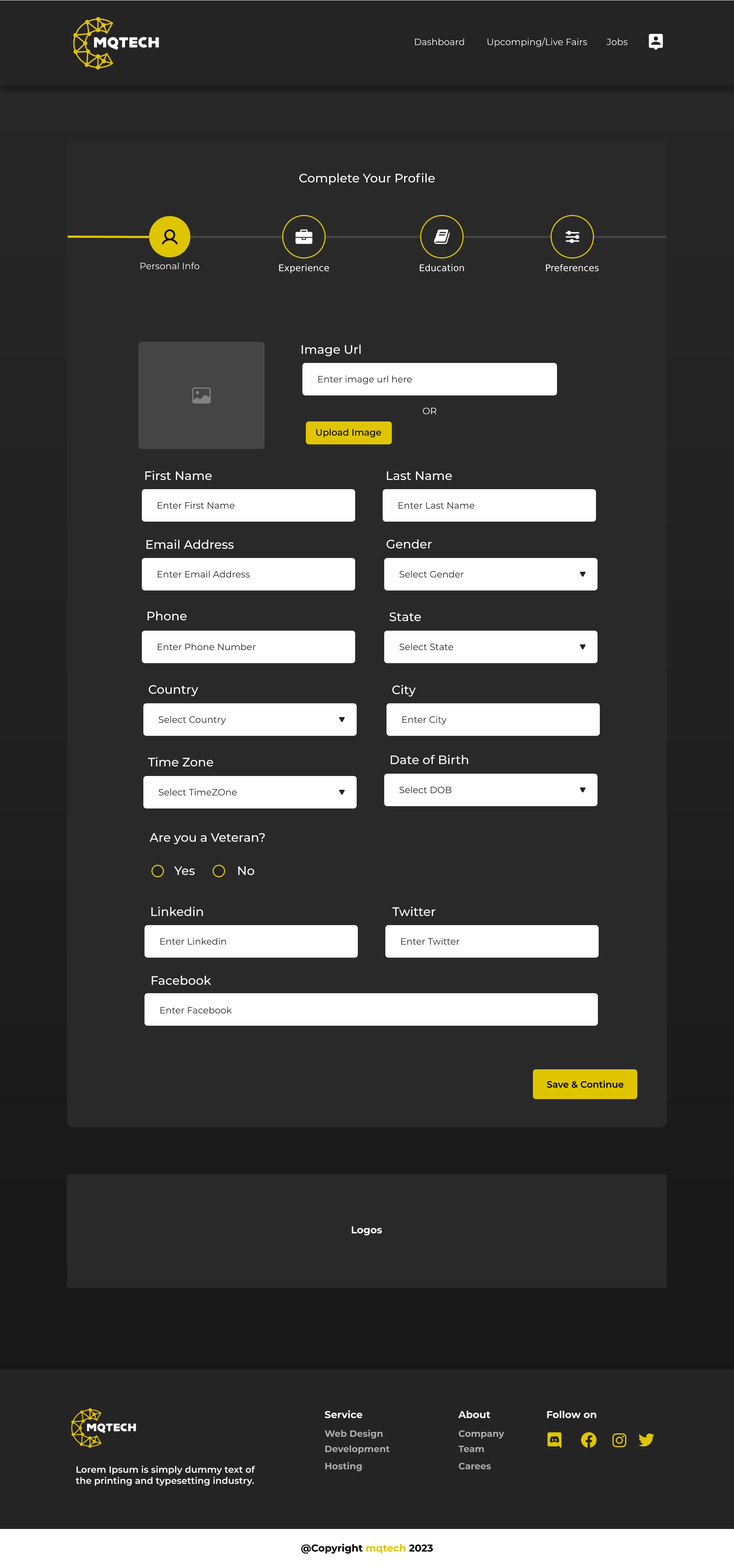
<style>
.page{position:relative;width:734px;height:1568px;background:#292929}
.page>*{position:absolute;margin:0}
.t1{font:9.2px "Montserrat-Regular";color:#ffffff}
.t2{font:12.2px "Montserrat-Medium";color:#ffffff}
.t3{font:9.2px "DejaVuSans";color:#ffffff}
.t4{font:9.2px "Montserrat-Regular";color:#292929}
.t5{font:9.2px "Montserrat-Medium";color:#000000}
.t6{font:9.2px "Montserrat-SemiBold";color:#000000}
.t7{font:9.9px "Montserrat-Bold";color:#ffffff}
.t8{font:9.2px "Montserrat-Bold";color:#acacac}
.t9{font:9.2px "Montserrat-SemiBold";color:#ffffff}
.t10{font:9.9px "Montserrat-Bold";color:#000000}
.t11{font:9.9px "Montserrat-Bold";color:#dfc500}
</style>
<div class="page">
<p class="t1" style="left:415px;top:38px;width:49px;height:8px">Dashboard</p>
<p class="t1" style="left:488px;top:37px;width:99px;height:10px">Upcomping/Live Fairs</p>
<p class="t1" style="left:607px;top:38px;width:21px;height:8px">Jobs</p>
<p class="t2" style="left:299px;top:173px;width:136px;height:12px">Complete Your Profile</p>
<p class="t1" style="left:140px;top:262px;width:60px;height:8px">Personal Info</p>
<p class="t3" style="left:279px;top:264px;width:50px;height:9px">Experience</p>
<p class="t3" style="left:420px;top:264px;width:44px;height:8px">Education</p>
<p class="t3" style="left:546px;top:264px;width:53px;height:8px">Preferences</p>
<p class="t2" style="left:302px;top:345px;width:59px;height:11px">Image Url</p>
<p class="t4" style="left:318px;top:376px;width:94px;height:8px">Enter image url here</p>
<p class="t1" style="left:423px;top:408px;width:14px;height:7px">OR</p>
<p class="t5" style="left:316px;top:429px;width:65px;height:9px">Upload Image</p>
<p class="t2" style="left:145px;top:470px;width:67px;height:10px">First Name</p>
<p class="t2" style="left:387px;top:471px;width:65px;height:9px">Last Name</p>
<p class="t4" style="left:158px;top:502px;width:77px;height:7px">Enter First Name</p>
<p class="t4" style="left:399px;top:502px;width:76px;height:7px">Enter Last Name</p>
<p class="t2" style="left:146px;top:539px;width:88px;height:10px">Email Address</p>
<p class="t2" style="left:387px;top:539px;width:45px;height:10px">Gender</p>
<p class="t4" style="left:158px;top:571px;width:92px;height:7px">Enter Email Address</p>
<p class="t4" style="left:400px;top:571px;width:64px;height:7px">Select Gender</p>
<p class="t2" style="left:147px;top:611px;width:40px;height:10px">Phone</p>
<p class="t2" style="left:390px;top:612px;width:31px;height:9px">State</p>
<p class="t4" style="left:158px;top:643px;width:98px;height:7px">Enter Phone Number</p>
<p class="t4" style="left:400px;top:643px;width:54px;height:8px">Select State</p>
<p class="t4" style="left:400px;top:643px;width:54px;height:8px">Select State</p>
<p class="t2" style="left:149px;top:685px;width:49px;height:11px">Country</p>
<p class="t2" style="left:392px;top:685px;width:24px;height:12px">City</p>
<p class="t4" style="left:159px;top:716px;width:67px;height:9px">Select Country</p>
<p class="t4" style="left:402px;top:716px;width:45px;height:9px">Enter City</p>
<p class="t2" style="left:148px;top:757px;width:65px;height:10px">Time Zone</p>
<p class="t2" style="left:391px;top:755px;width:77px;height:9px">Date of Birth</p>
<p class="t4" style="left:159px;top:789px;width:78px;height:7px">Select TimeZOne</p>
<p class="t4" style="left:400px;top:786px;width:52px;height:8px">Select DOB</p>
<p class="t2" style="left:150px;top:833px;width:115px;height:11px">Are you a Veteran?</p>
<p class="t2" style="left:174px;top:866px;width:21px;height:9px">Yes</p>
<p class="t2" style="left:238px;top:866px;width:16px;height:9px">No</p>
<p class="t2" style="left:151px;top:906px;width:52px;height:10px">Linkedin</p>
<p class="t2" style="left:392px;top:906px;width:44px;height:10px">Twitter</p>
<p class="t4" style="left:160px;top:938px;width:66px;height:7px">Enter Linkedin</p>
<p class="t4" style="left:401px;top:938px;width:59px;height:7px">Enter Twitter</p>
<p class="t2" style="left:152px;top:976px;width:59px;height:9px">Facebook</p>
<p class="t4" style="left:160px;top:1007px;width:72px;height:7px">Enter Facebook</p>
<p class="t6" style="left:547px;top:1080px;width:77px;height:8px">Save &amp; Continue</p>
<p class="t7" style="left:352px;top:1226px;width:30px;height:10px">Logos</p>
<p class="t7" style="left:325px;top:1410px;width:38px;height:8px">Service</p>
<p class="t7" style="left:458px;top:1410px;width:33px;height:8px">About</p>
<p class="t7" style="left:547px;top:1410px;width:50px;height:8px">Follow on</p>
<p class="t8" style="left:325px;top:1430px;width:58px;height:9px">Web Design</p>
<p class="t8" style="left:459px;top:1430px;width:46px;height:9px">Company</p>
<p class="t8" style="left:325px;top:1445px;width:65px;height:9px">Development</p>
<p class="t8" style="left:459px;top:1446px;width:25px;height:7px">Team</p>
<p class="t9" style="left:76px;top:1466px;width:179px;height:20px">Lorem Ipsum is simply dummy text of <br>the printing and typesetting industry.</p>
<p class="t8" style="left:325px;top:1462px;width:37px;height:9px">Hosting</p>
<p class="t8" style="left:459px;top:1462px;width:32px;height:8px">Carees</p>
<p class="t10" style="left:301px;top:1544px;width:132px;height:10px">@Copyright <span class="t11">mqtech</span> 2023</p>
</div>
